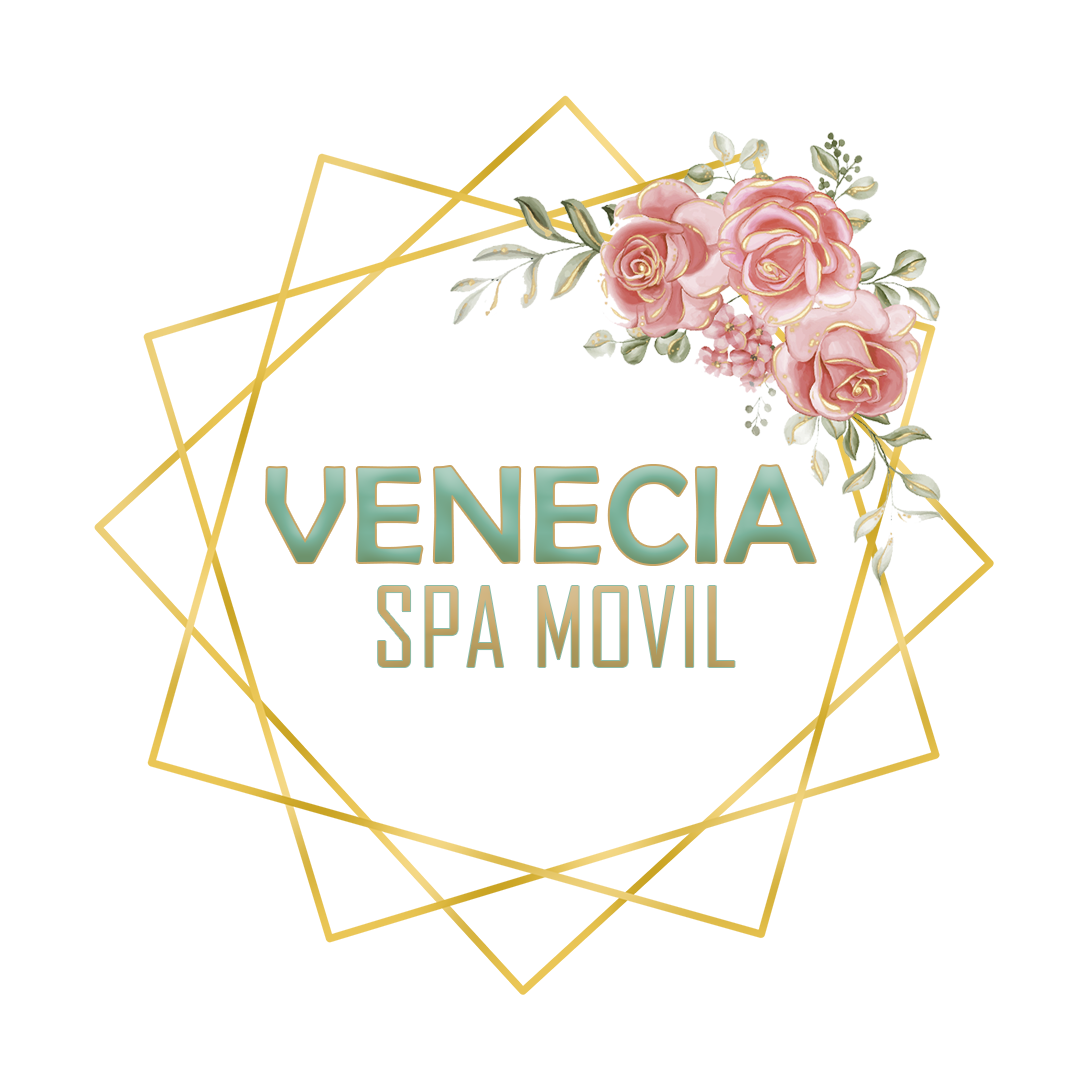
<style>
.page{position:relative;width:1080px;height:1080px;background:#ffffff}
.page>*{position:absolute;margin:0}
.t1{font:137.5px "BerlinSansFB-Reg";letter-spacing:0.02em;color:#7bb29b;text-transform:uppercase}
.t2{font:105.8px "AgencyFB-Reg";letter-spacing:0.02em;color:#c7a566;text-transform:uppercase}
</style>
<div class="page">
<p class="t1" style="left:267px;top:466px;width:548px;height:98px">Venecia</p>
<p class="t2" style="left:378px;top:586px;width:357px;height:81px">spa Movil</p>
</div>
